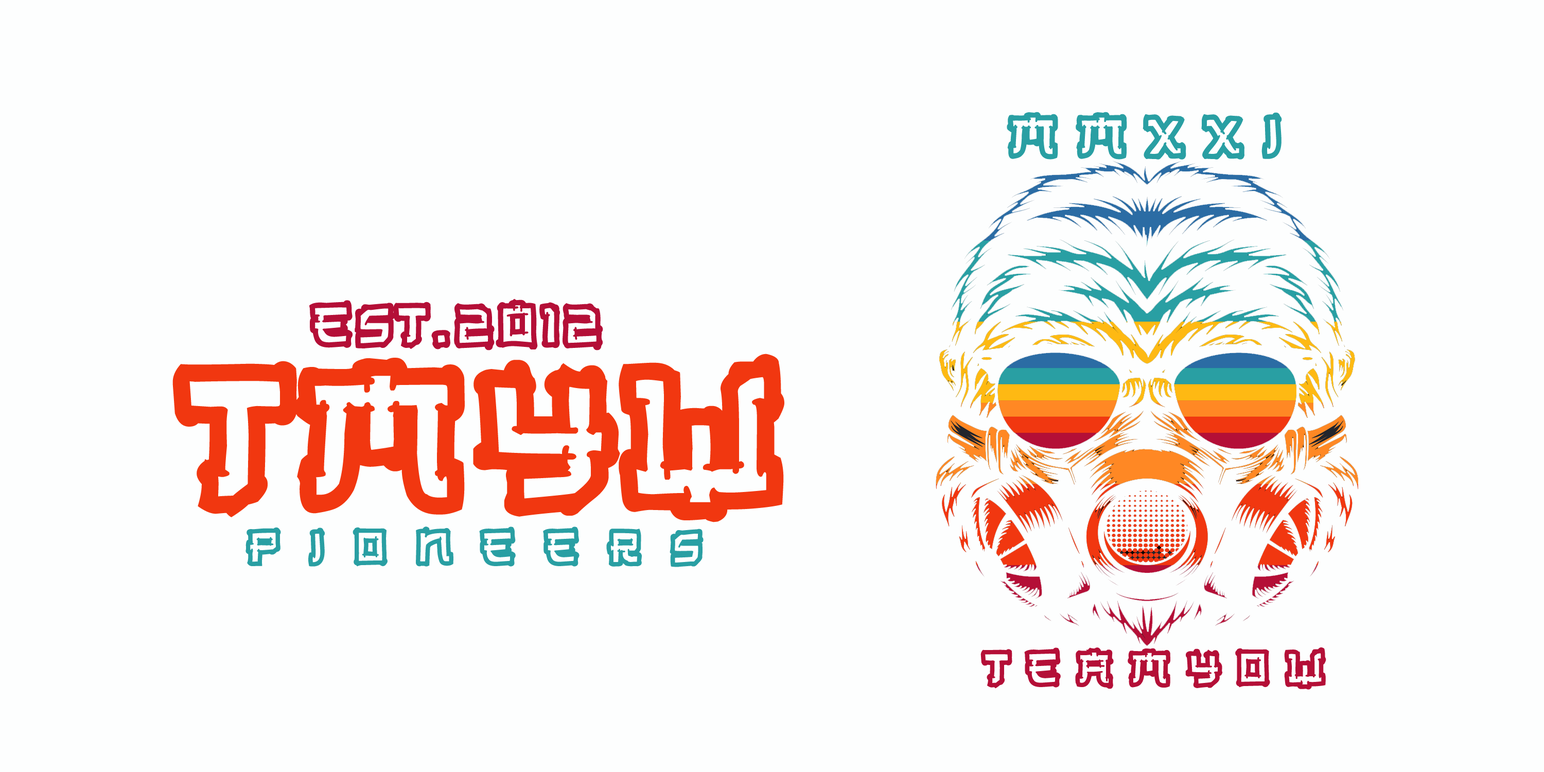
<style>
.page{position:relative;width:1544px;height:772px;background:#fdfefe}
.page>*{position:absolute;margin:0}
.t1{font:64.3px "OldJapanese";color:#299fa3}
.t2{font:64.3px "OldJapanese";color:#b40f37}
.t3{font:214.5px "OldJapanese";color:#f13710}
.t4{font:53.6px "OldJapanese";color:#299fa3}
.t5{font:53.6px "OldJapanese";color:#b40f37}
</style>
<div class="page">
<p class="t1" style="left:1007px;top:112px;width:275px;height:48px">m m x x i</p>
<p class="t2" style="left:309px;top:299px;width:294px;height:52px">est.2012</p>
<p class="t3" style="left:172px;top:354px;width:613px;height:168px">tmyw</p>
<p class="t4" style="left:246px;top:527px;width:458px;height:40px">p  i  o  n  e  e  r  s</p>
<p class="t5" style="left:981px;top:647px;width:346px;height:43px">t e a m y o w</p>
</div>
